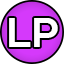
<style>
.page{position:relative;width:64px;height:64px;background:#ffffff}
.page>*{position:absolute;margin:0}
.t1{font:40px "Geometos";letter-spacing:-0.01em;color:#ffffff}
</style>
<div class="page">
<p class="t1" style="left:9px;top:18px;width:49px;height:29px">lp</p>
</div>
